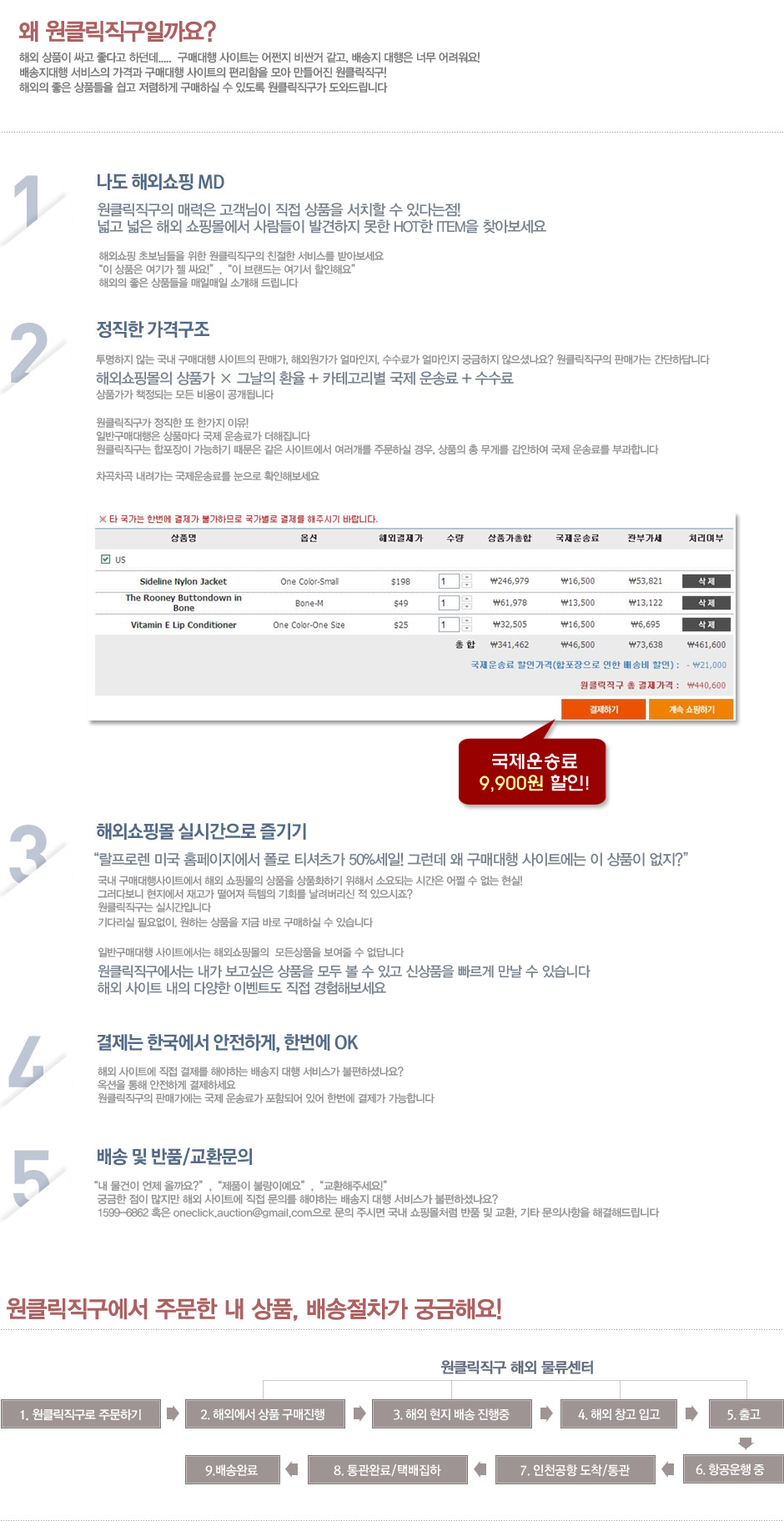
<style>
.page{position:relative;width:784px;height:1521px;background:#ffffff}
.page>*{position:absolute;margin:0}
.t1{font:23.4px "YDIYGO330";letter-spacing:-0.075em;color:#ad6161;font-weight:bold;scale:0.97 1}
.t2{font:11.7px/15px "YDIYGO330";letter-spacing:-0.05em;color:#777777;scale:0.95 1}
.t3{font:10.8px/13.3px "YDIYGO330";letter-spacing:-0.05em;color:#929292;scale:0.97 1}
.t4{font:15px/16.7px "YDIYGO330";letter-spacing:-0.05em;color:#77808c;scale:0.97 1}
.t5{font:10.8px/15px "YDIYGO330";letter-spacing:-0.05em;color:#929292;scale:0.97 1}
.t6{font:15px/20px "YDIYGO330";letter-spacing:-0.05em;color:#77808c;scale:0.97 1}
.t7{font:18.3px/21.7px "HYwulM";letter-spacing:-0.05em;color:#ffff99}
.t8{font:18.3px/21.7px "HYwulM";letter-spacing:-0.05em;color:#ffffff}
.t9{font:10.8px/20px "YDIYGO330";letter-spacing:-0.05em;color:#929292;scale:0.97 1}
.t10{font:14.2px/20px "YDIYGO330";letter-spacing:-0.05em;color:#77808c;scale:0.97 1}
.t11{font:14.2px/16.7px "YDIYGO330";letter-spacing:-0.05em;color:#77808c;scale:0.97 1}
.t12{font:10.8px/13.3px "YDIYGO330";letter-spacing:-0.05em;color:#929292}
.t13{font:10.8px/13.3px "YDIYGO330";color:#929292}
.t14{font:23.4px "YDIYGO330";letter-spacing:-0.05em;color:#ad6161;font-weight:bold;scale:0.97 1}
.t15{font:15px "YDIYGO330";letter-spacing:-0.05em;color:#636c7d;font-weight:bold;scale:0.97 1}
.t16{font:12.5px "YDIYGO330";letter-spacing:-0.05em;color:#ffffff;scale:0.97 1}
</style>
<div class="page">
<p class="t1" style="left:19px;top:20px;width:197px;height:23px">왜 원클릭직구일까요?</p>
<p class="t2" style="left:19px;top:52px;width:461px;height:41px">해외 상품이 싸고 좋다고 하던데.....  구매대행 사이트는 어쩐지 비싼거 같고, 배송지 대행은 너무 어려워요!<br>배송지대행 서비스의 가격과 구매대행 사이트의 편리함을 모아 만들어진 원클릭직구!<br>해외의 좋은 상품들을 쉽고 저렴하게 구매하실 수 있도록 원클릭직구가 도와드립니다</p>
<p class="t3" style="left:98px;top:203px;width:448px;height:86px"><span class="t4"> 원클릭직구의 매력은 고객님이 직접 상품을 서치할 수 있다는점! <br> 넓고 넓은 해외 쇼핑몰에서 사람들이 발견하지 못한 HOT한 ITEM을 찾아보세요<br><br></span>  해외쇼핑 초보님들을 위한 원클릭직구의 친절한 서비스를 받아보세요<br>“이 상품은 여기가 젤 싸요!”,“이 브랜드는 여기서 할인해요”<br>  해외의 좋은 상품들을 매일매일 소개해 드립니다</p>
<p class="t3" style="left:96px;top:354px;width:614px;height:128px"><span class="t5">투명하지 않는 국내 구매대행 사이트의 판매가, 해외원가가 얼마인지, 수수료가 얼마인지 궁금하지 않으셨나요? 원클릭직구의 판매가는 간단하답니다<br></span><span class="t6">해외쇼핑몰의 상품가 × 그날의 환율 + 카테고리별 국제 운송료 + 수수료<br></span><span class="t5">상품가가 책정되는 모든 비용이 공개됩니다<br><br></span>원클릭직구가 정직한 또 한가지 이유!<br>일반구매대행은 상품마다 국제 운송료가 더해집니다<br>원클릭직구는 합포장이 가능하기 때문은 같은 사이트에서 여러개를 주문하실 경우, 상품의 총 무게를 감안하여 국제 운송료를 부과합니다<br><br>차곡차곡 내려가는 국제운송료를 눈으로 확인해보세요</p>
<p class="t7" style="left:480px;top:752px;width:109px;height:40px;text-align:center"><span class="t8">국제운송료<br></span>9,900원 <span class="t8">할인!</span></p>
<p class="t3" style="left:94px;top:851px;width:594px;height:144px"><span class="t6">“랄프로렌 미국 홈페이지에서 폴로 티셔츠가 50%세일! 그런데 왜 구매대행 사이트에는 이 상품이 없지?”<br></span><span class="t9">    국</span>내 구매대행사이트에서 해외 쇼핑몰의 상품을 상품화하기 위해서 소요되는 시간은 어쩔 수 없는 현실!<br>    그러다보니 현지에서 재고가 떨어져 득템의 기회를 날려버리신 적 있으시죠?<br>    원클릭직구는 실시간입니다<br>    기다리실 필요없이, 원하는 상품을 지<span class="t5">금 바로 구매하실 수 있습니다<br><br>    일반구매대행 사이트에서는 해외쇼핑몰의  모든상품을 보여줄 수 없답니다<br></span><span class="t10">   원클릭직구에서는 내가 보고싶은 상품을 모두 </span><span class="t11">볼 수 있고 신상품을 빠르게 만날 수 있습니다<br>   해외 사이트 내의 다양한 이벤트도 직접 경험해보세요</span></p>
<p class="t3" style="left:98px;top:1067px;width:336px;height:37px">해외 사이트에 직접 결제를 해야하는 배송지 대행 서비스가 불편하셨나요?<br>옥션을 통해 안전하게 결제하세요<br>원클릭직구의 판매가에는 국제 운송료가 포함되어 있어 한번에 결제가 가능합니다</p>
<p class="t12" style="left:94px;top:1180px;width:566px;height:38px">“내 물건이 언제 올까요?”,“제품이 불량이예요”,“교환해주세요!”<br>   궁금한 점이 많지만 해외 사이트에 직접 문의를 해야하는 배송지 대행 서비스가 불편하셨나요?<br>   1599-6862 혹은 <span class="t13">oneclick.auction@gmail.com</span>으로 문의 주시면 국내 쇼핑몰처럼 반품 및 교환, 기타 문의사항을 해결해드립니다</p>
<p class="t14" style="left:7px;top:1298px;width:494px;height:23px">원클릭직구에서 주문한 내 상품, 배송절차가 궁금해요!</p>
<p class="t15" style="left:440px;top:1360px;width:153px;height:14px">원클릭직구 해외 물류센터</p>
<p class="t16" style="left:20px;top:1409px;width:121px;height:12px">1. 원클릭직구로 주문하기</p>
</div>
